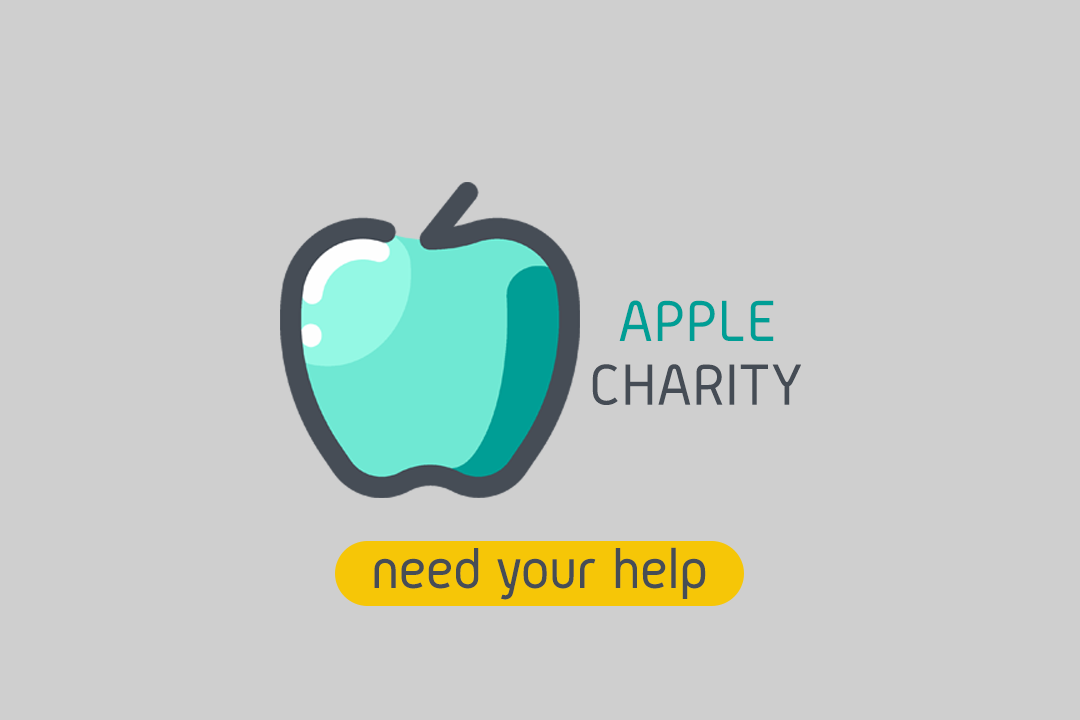
<style>
.page{position:relative;width:1080px;height:720px;background:#cfcfcf}
.page>*{position:absolute;margin:0}
.t1{font:60px "Gidolinya-Regular";color:#009e95}
.t2{font:60px "Gidolinya-Regular";color:#454c55}
.t3{font:60px "Gidolinya-Regular";color:#464d56}
</style>
<div class="page">
<p class="t1" style="left:619px;top:300px;width:155px;height:41px">APPLE</p>
<p class="t2" style="left:592px;top:364px;width:209px;height:41px">CHARITY</p>
<p class="t3" style="left:374px;top:547px;width:332px;height:53px">need your help</p>
</div>
